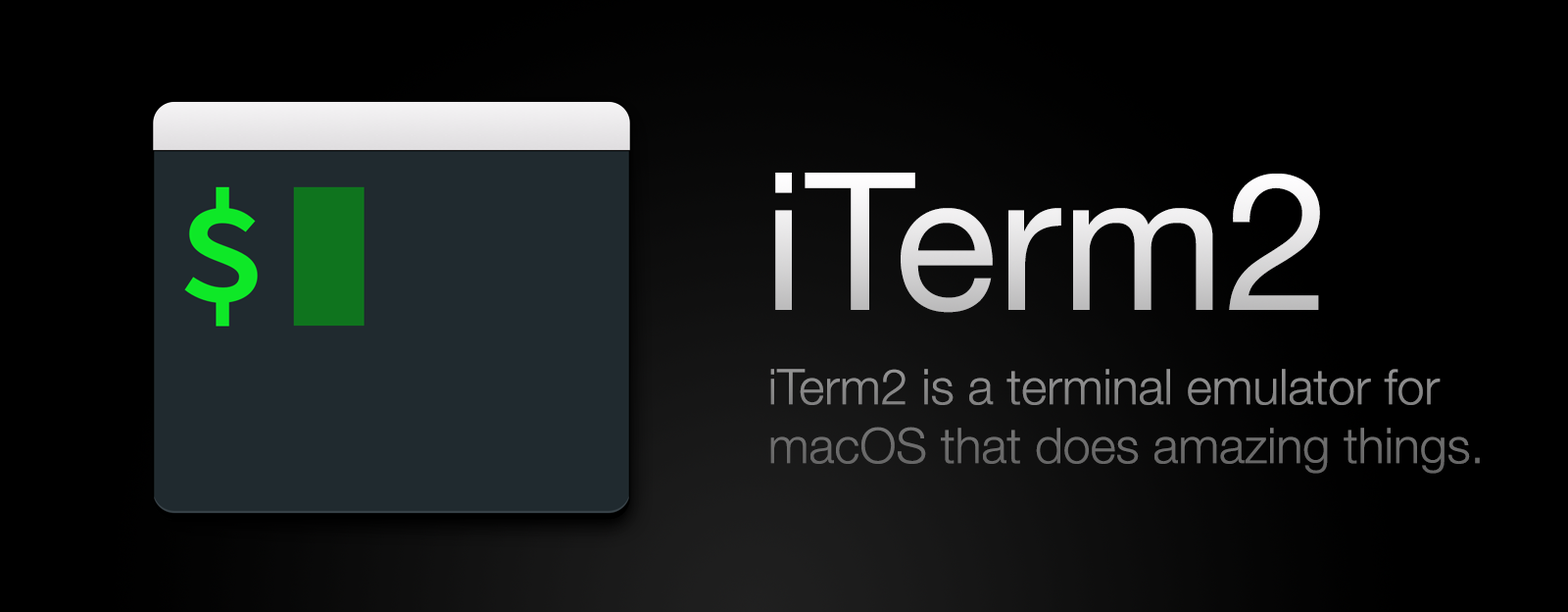
<style>
.page{position:relative;width:1568px;height:612px;background:#000000}
.page>*{position:absolute;margin:0}
.t1{font:192.1px "HelveticaNeue"}
.t2{font:49px "HelveticaNeue-Light"}
</style>
<div class="page">
<p class="t1" style="left:775px;top:172px;width:545px;height:141px">iTerm2</p>
<p class="t2" style="left:770px;top:368px;width:710px;height:105px">iTerm2 is a terminal emulator for<br>macOS that does amazing things.</p>
</div>
